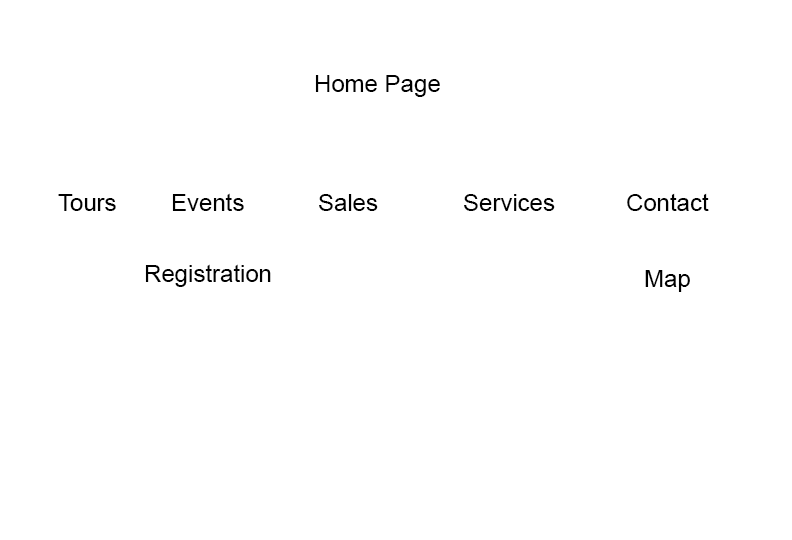
<style>
.page{position:relative;width:792px;height:540px;background:#ffffff}
.page>*{position:absolute;margin:0}
.t1{font:24px "ArialMT";color:#000000}
</style>
<div class="page">
<p class="t1" style="left:315px;top:75px;width:125px;height:22px">Home Page</p>
<p class="t1" style="left:58px;top:194px;width:58px;height:17px">Tours</p>
<p class="t1" style="left:172px;top:193px;width:72px;height:18px">Events</p>
<p class="t1" style="left:319px;top:194px;width:59px;height:17px">Sales</p>
<p class="t1" style="left:464px;top:194px;width:91px;height:17px">Services</p>
<p class="t1" style="left:627px;top:193px;width:82px;height:18px">Contact</p>
<p class="t1" style="left:145px;top:264px;width:126px;height:23px">Registration</p>
<p class="t1" style="left:645px;top:270px;width:45px;height:22px">Map</p>
</div>
